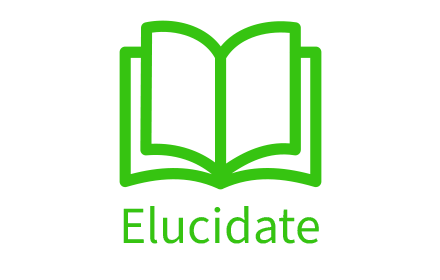
<style>
.page{position:relative;width:440px;height:280px;background:#ffffff}
.page>*{position:absolute;margin:0}
.t1{font:52px "SourceSans3Roman-Regular";color:#36c411}
</style>
<div class="page">
<p class="t1" style="left:123px;top:206px;width:196px;height:38px">Elucidate</p>
</div>
